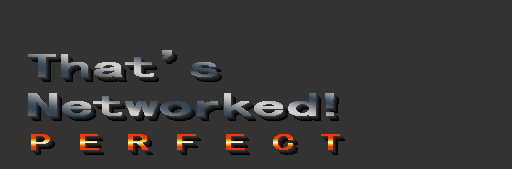
<style>
.page{position:relative;width:512px;height:169px;background:#333333}
.page>*{position:absolute;margin:0}
.t1{font:33px "MS-Gothic";font-weight:bold;scale:2 1}
.t2{font:22px "MS-Gothic";letter-spacing:0.6em;font-weight:bold;scale:2 1}
</style>
<div class="page">
<p class="t1" style="left:28px;top:50px;width:306px;height:66px">That’s<br>Networked!</p>
<p class="t2" style="left:31px;top:134px;width:309px;height:16px">PERFECT</p>
</div>
